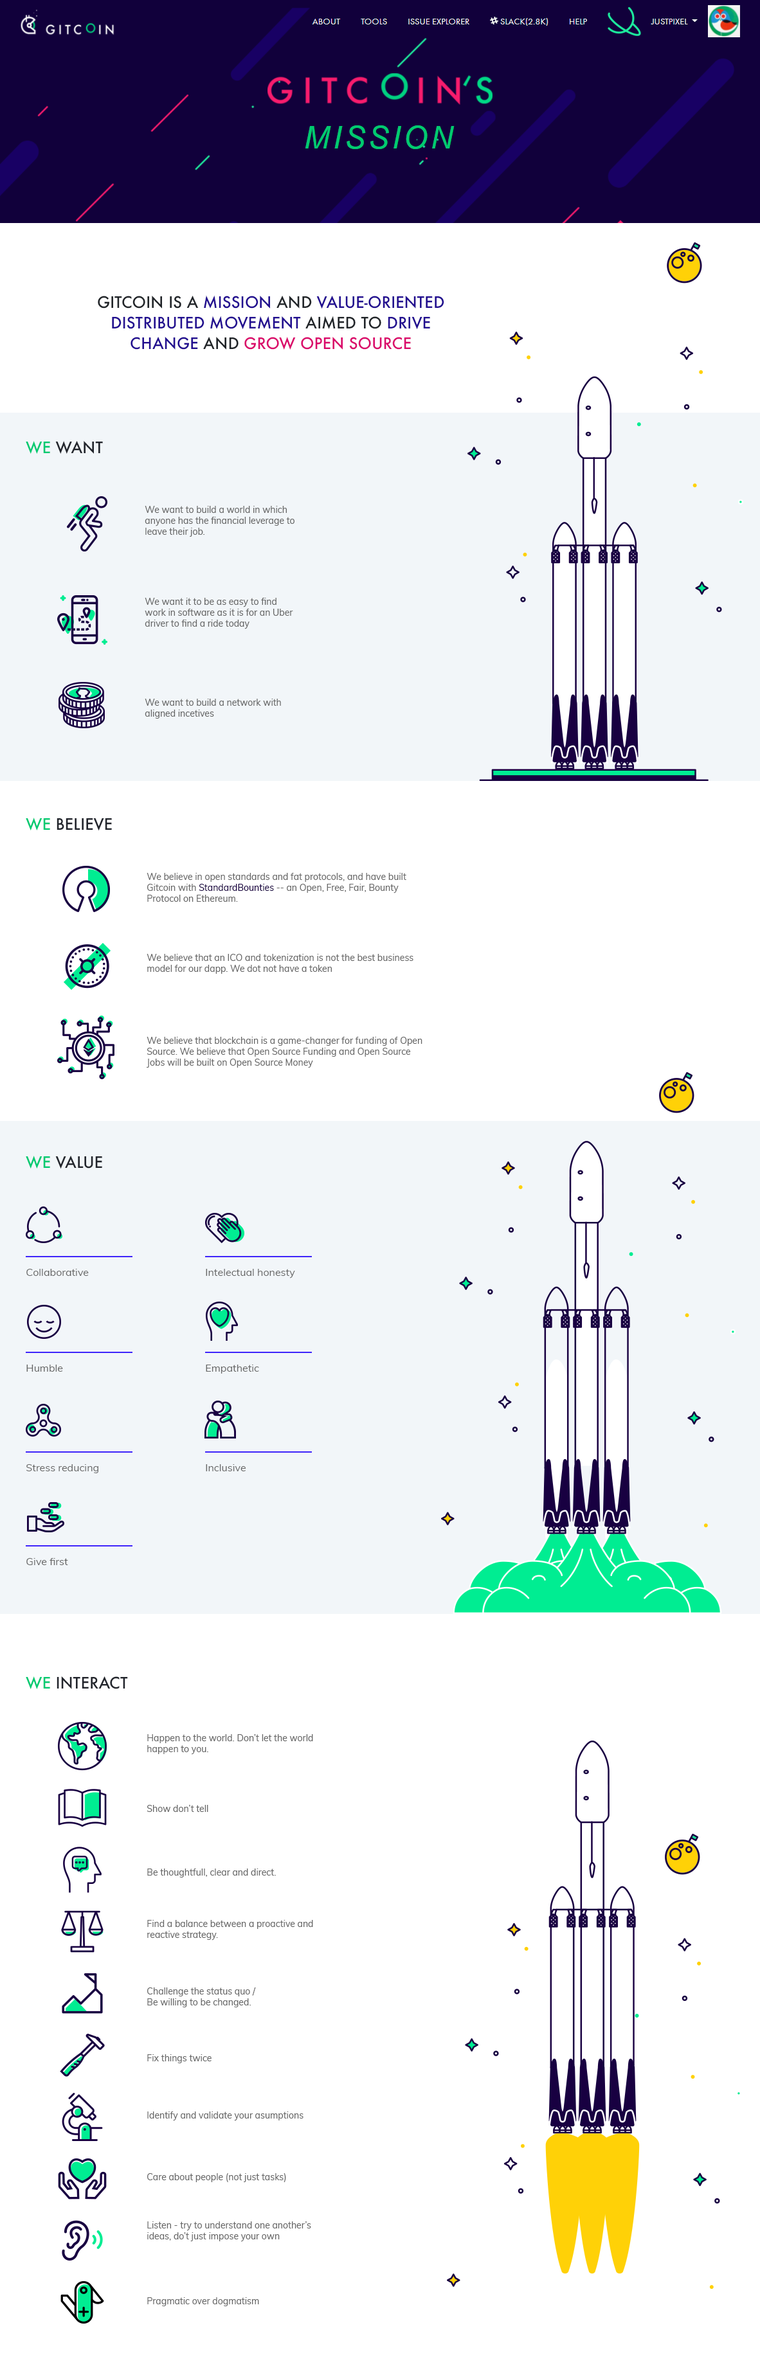
<style>
.page{position:relative;width:760px;height:2375px;background:#ffffff}
.page>*{position:absolute;margin:0}
.t1{font:15.4px/20.6px "Futura-Medium";color:#220e90}
.t2{font:15.4px/20.6px "Futura-Medium";color:#212529}
.t3{font:15.4px/20.6px "Futura-Medium";color:#da086b}
.t4{font:15.4px "Futura-Medium";color:#22252c;text-transform:uppercase}
.t5{font:15.4px "Futura-Medium";color:#00ca71;text-transform:uppercase}
.t6{font:9px "Muli-Regular";color:#666666}
.t7{font:9px "Muli-Regular";color:#180041}
.t8{font:10.3px "Muli-Regular";color:#666666}
</style>
<div class="page">
<p class="t1" style="left:98px;top:295px;width:346px;height:55px;text-align:center"><span class="t2">GITCOIN IS A </span>MISSION<span class="t2"> AND </span>VALUE-ORIENTED DISTRIBUTED MOVEMENT <span class="t2">AIMED TO </span>DRIVE CHANGE<span class="t2"> AND </span><span class="t3">GROW OPEN SOURCE</span></p>
<p class="t4" style="left:26px;top:441px;width:77px;height:13px"><span class="t5">we </span>want</p>
<p class="t6" style="left:145px;top:506px;width:149px;height:31px">We want to build a world in which anyone has the financial leverage to leave their job.</p>
<p class="t6" style="left:145px;top:598px;width:148px;height:31px">We want it to be as easy to find work in software as it is for an Uber driver to find a ride today</p>
<p class="t6" style="left:145px;top:699px;width:136px;height:20px">We want to build a network with aligned incetives</p>
<p class="t4" style="left:26px;top:818px;width:86px;height:13px"><span class="t5">we </span>believe</p>
<p class="t6" style="left:147px;top:873px;width:259px;height:29px">We believe in open standards and fat protocols, and have built Gitcoin with <span class="t7">StandardBounties</span> -- an Open, Free, Fair, Bounty Protocol on Ethereum.</p>
<p class="t6" style="left:147px;top:954px;width:266px;height:20px">We believe that an ICO and tokenization is not the best business model for our dapp. We dot not have a token</p>
<p class="t6" style="left:147px;top:1037px;width:275px;height:31px">We believe that blockchain is a game-changer for funding of Open Source. We believe that Open Source Funding and Open Source Jobs will be built on Open Source Money</p>
<p class="t4" style="left:26px;top:1156px;width:76px;height:13px"><span class="t5">we </span>value</p>
<p class="t8" style="left:26px;top:1269px;width:63px;height:7px">Collaborative</p>
<p class="t8" style="left:206px;top:1269px;width:89px;height:10px">Intelectual honesty</p>
<p class="t8" style="left:26px;top:1365px;width:37px;height:7px">Humble</p>
<p class="t8" style="left:206px;top:1365px;width:53px;height:9px">Empathetic</p>
<p class="t8" style="left:26px;top:1464px;width:72px;height:9px">Stress reducing</p>
<p class="t8" style="left:206px;top:1464px;width:40px;height:7px">Inclusive</p>
<p class="t8" style="left:26px;top:1558px;width:42px;height:7px">Give first</p>
<p class="t4" style="left:26px;top:1677px;width:102px;height:12px"><span class="t5">we </span>interact</p>
<p class="t6" style="left:147px;top:1734px;width:166px;height:21px">Happen to the world. Don’t let the world happen to you.</p>
<p class="t6" style="left:147px;top:1805px;width:61px;height:7px">Show don’t tell</p>
<p class="t6" style="left:147px;top:1869px;width:129px;height:9px">Be thoughtfull, clear and direct.</p>
<p class="t6" style="left:147px;top:1920px;width:166px;height:21px">Find a balance between a proactive and reactive strategy.</p>
<p class="t6" style="left:147px;top:1988px;width:109px;height:20px">Challenge the status quo / <br>Be willing to be changed.</p>
<p class="t6" style="left:147px;top:2055px;width:64px;height:9px">Fix things twice</p>
<p class="t6" style="left:147px;top:2112px;width:156px;height:9px">Identify and validate your asumptions</p>
<p class="t6" style="left:147px;top:2173px;width:139px;height:9px">Care about people (not just tasks)</p>
<p class="t6" style="left:147px;top:2222px;width:164px;height:20px">Listen - try to understand one another’s ideas, do’t just impose your own</p>
<p class="t6" style="left:147px;top:2298px;width:112px;height:9px">Pragmatic over dogmatism</p>
</div>
